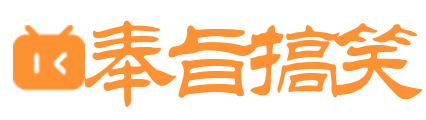
<style>
.page{position:relative;width:426px;height:120px;background:#ffffff}
.page>*{position:absolute;margin:0}
.t1{font:112.4px "STLiti";letter-spacing:-0.075em;color:#fe9132;scale:0.92 1}
</style>
<div class="page">
<p class="t1" style="left:84px;top:20px;width:339px;height:87px">奉旨搞笑</p>
</div>
